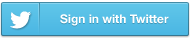
<style>
.page{position:relative;width:190px;height:38px}
.page>*{position:absolute;margin:0}
.t1{font:12px "HelveticaNeue-Bold";color:#ffffff}
</style>
<div class="page">
<p class="t1" style="left:60px;top:14px;width:109px;height:12px">Sign in with Twitter</p>
</div>
